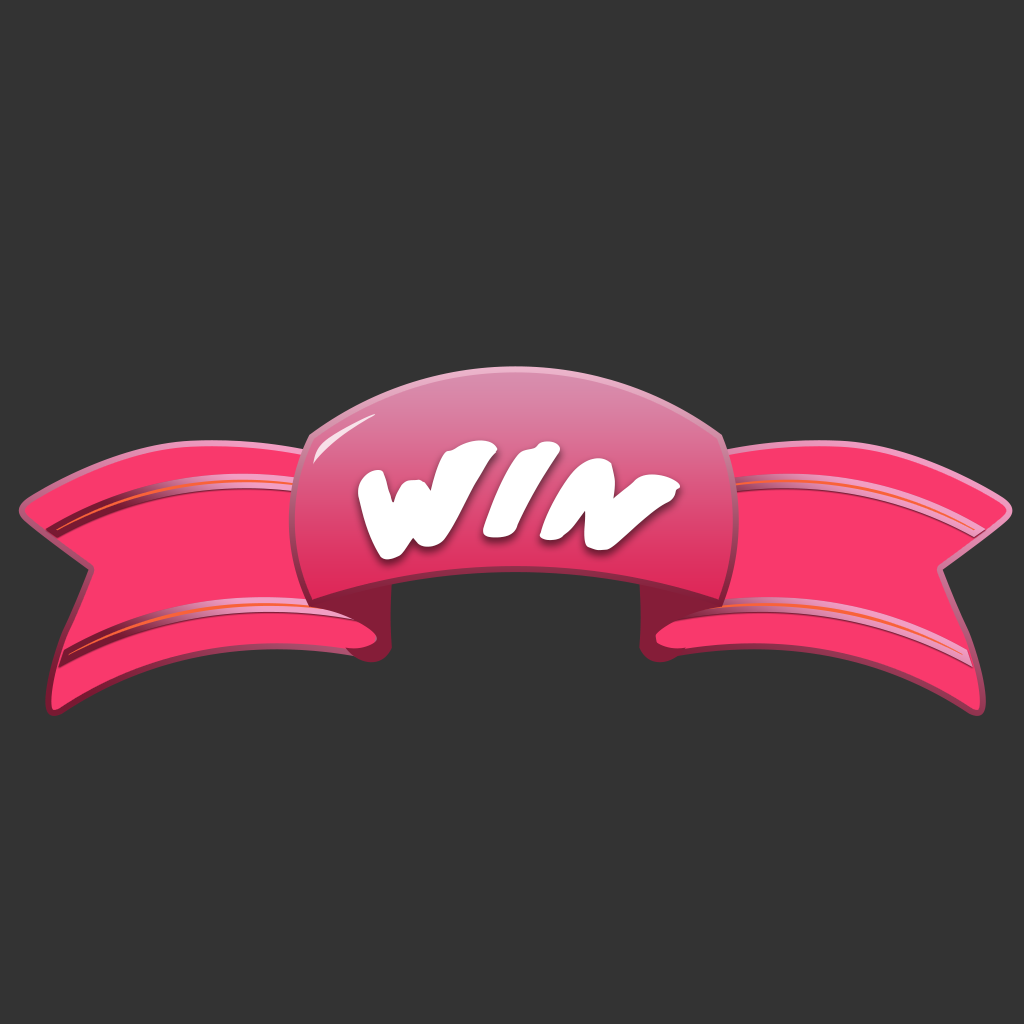
<style>
.page{position:relative;width:1024px;height:1024px;background:#333333}
.page>*{position:absolute;margin:0}
.t1{font:116.6px "Knewave-Regular";letter-spacing:0.04em;color:#ffffff}
</style>
<div class="page">
<p class="t1" style="left:358px;top:440px;width:322px;height:120px">WIN</p>
</div>
